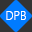
<style>
.page{position:relative;width:32px;height:32px;background:#007bff}
.page>*{position:absolute;margin:0}
.t1{font:12px "SegoeUI-Light";color:#ffffff}
</style>
<div class="page">
<p class="t1" style="left:6px;top:11px;width:20px;height:9px">DPB</p>
</div>
